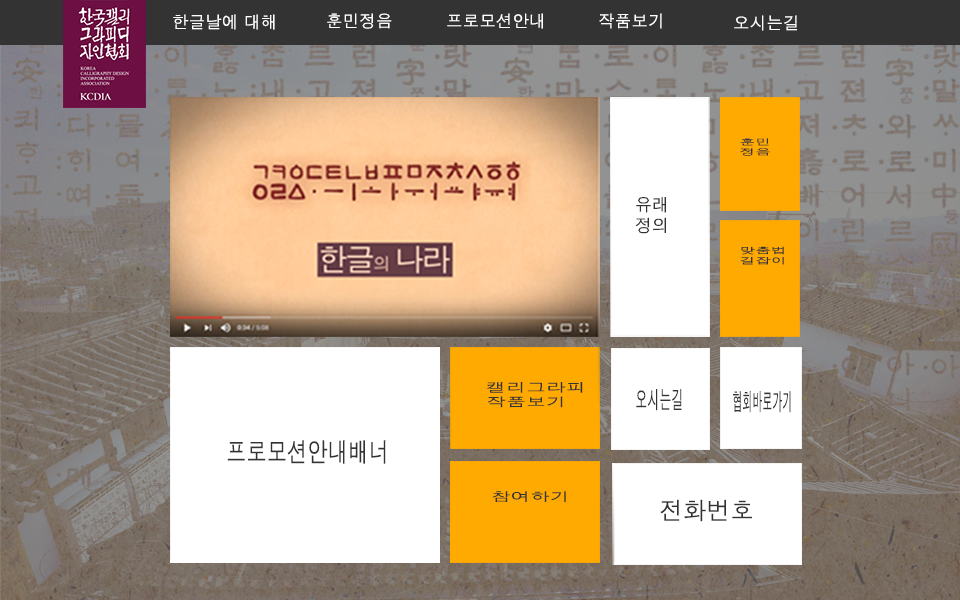
<style>
.page{position:relative;width:960px;height:600px}
.page>*{position:absolute;margin:0}
.t1{font:16.7px "H2gtrM";color:#ffffff}
.t2{font:8.3px "H2gtrM";color:#333333;scale:1.9 1}
.t3{font:17.2px "H2gtrM";color:#333333}
.t4{font:8.5px "H2gtrM";color:#333333;scale:1.85 1}
.t5{font:12.1px "H2gtrM";color:#333333;scale:1.65 1}
.t6{font:23.9px "H2gtrM";color:#333333;scale:0.5 1}
.t7{font:23.9px "H2gtrM";color:#333333;scale:0.42 1}
.t8{font:26.7px "H2gtrM";color:#333333;scale:0.76 1}
.t9{font:12.1px "H2gtrM";color:#333333;scale:1.61 1}
.t10{font:24.2px "H2gtrM";color:#333333}
</style>
<div class="page">
<p class="t1" style="left:173px;top:14px;width:102px;height:16px">한글날에 대해</p>
<p class="t1" style="left:327px;top:13px;width:65px;height:16px">훈민정음</p>
<p class="t1" style="left:447px;top:13px;width:96px;height:16px">프로모션안내</p>
<p class="t1" style="left:599px;top:13px;width:63px;height:16px">작품보기</p>
<p class="t1" style="left:734px;top:15px;width:63px;height:16px">오시는길</p>
<p class="t2" style="left:740px;top:138px;width:30px;height:18px">훈민<br>정음</p>
<p class="t3" style="left:635px;top:197px;width:31px;height:37px">유래<br>정의</p>
<p class="t4" style="left:740px;top:246px;width:44px;height:19px">맞춤법<br>길잡이</p>
<p class="t5" style="left:487px;top:382px;width:96px;height:26px">캘리그라피<br>작품보기</p>
<p class="t6" style="left:636px;top:389px;width:46px;height:22px">오시는길</p>
<p class="t7" style="left:733px;top:391px;width:58px;height:22px">협회바로가기</p>
<p class="t8" style="left:227px;top:440px;width:159px;height:24px">프로모션안내배너</p>
<p class="t9" style="left:492px;top:491px;width:74px;height:11px">참여하기</p>
<p class="t10" style="left:660px;top:499px;width:92px;height:23px">전화번호</p>
</div>
